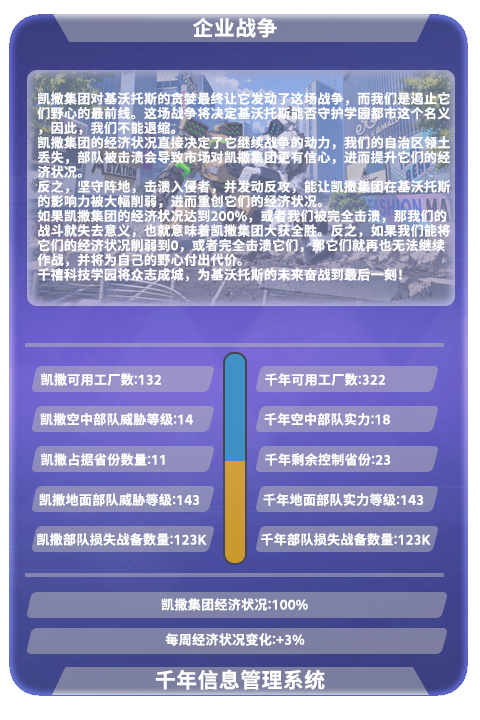
<style>
.page{position:relative;width:480px;height:720px}
.page>*{position:absolute;margin:0}
.t1{font:21.3px "LXGW975GothicSC-600W";color:#ffffff}
.t2{font:13.3px/14.7px "LXGW975GothicSC-600W";color:#ffffff}
.t3{font:13.3px "LXGW975GothicSC-600W";color:#ffffff}
</style>
<div class="page">
<p class="t1" style="left:193px;top:17px;width:84px;height:21px">企业战争</p>
<p class="t2" style="left:37px;top:92px;width:414px;height:190px">凯撒集团对基沃托斯的贪婪最终让它发动了这场战争，而我们是遏止它<br>们野心的最前线。这场战争将决定基沃托斯能否守护学园都市这个名义<br>，因此，我们不能退缩。<br>凯撒集团的经济状况直接决定了它继续战争的动力，我们的自治区领土<br>丢失，部队被击溃会导致市场对凯撒集团更有信心，进而提升它们的经<br>济状况。<br>反之，坚守阵地，击溃入侵者，并发动反攻，能让凯撒集团在基沃托斯<br>的影响力被大幅削弱，进而重创它们的经济状况。<br>如果凯撒集团的经济状况达到200%，或者我们被完全击溃，那我们的<br>战斗就失去意义，也就意味着凯撒集团大获全胜。反之，如果我们能将<br>它们的经济状况削弱到0，或者完全击溃它们，那它们就再也无法继续<br>作战，并将为自己的野心付出代价。<br>千禧科技学园将众志成城，为基沃托斯的未来奋战到最后一刻！</p>
<p class="t3" style="left:41px;top:373px;width:120px;height:13px">凯撒可用工厂数:132</p>
<p class="t3" style="left:265px;top:373px;width:120px;height:13px">千年可用工厂数:322</p>
<p class="t3" style="left:40px;top:413px;width:153px;height:13px">凯撒空中部队威胁等级:14</p>
<p class="t3" style="left:264px;top:412px;width:126px;height:14px">千年空中部队实力:18</p>
<p class="t3" style="left:41px;top:453px;width:124px;height:13px">凯撒占据省份数量:11</p>
<p class="t3" style="left:265px;top:453px;width:126px;height:13px">千年剩余控制省份:23</p>
<p class="t3" style="left:39px;top:493px;width:161px;height:13px">凯撒地面部队威胁等级:143</p>
<p class="t3" style="left:263px;top:493px;width:161px;height:13px">千年地面部队实力等级:143</p>
<p class="t3" style="left:37px;top:533px;width:170px;height:13px">凯撒部队损失战备数量:123K</p>
<p class="t3" style="left:261px;top:533px;width:170px;height:13px">千年部队损失战备数量:123K</p>
<p class="t3" style="left:161px;top:598px;width:147px;height:13px">凯撒集团经济状况:100%</p>
<p class="t3" style="left:165px;top:633px;width:140px;height:13px">每周经济状况变化:+3%</p>
<p class="t1" style="left:155px;top:669px;width:170px;height:21px">千年信息管理系统</p>
</div>
